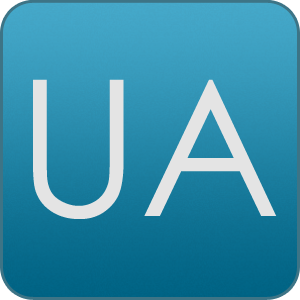
<style>
.page{position:relative;width:300px;height:300px}
.page>*{position:absolute;margin:0}
.t1{font:190px "CenturyGothic";color:#e4e4e4}
</style>
<div class="page">
<p class="t1" style="left:33px;top:79px;width:244px;height:140px">UA</p>
</div>
